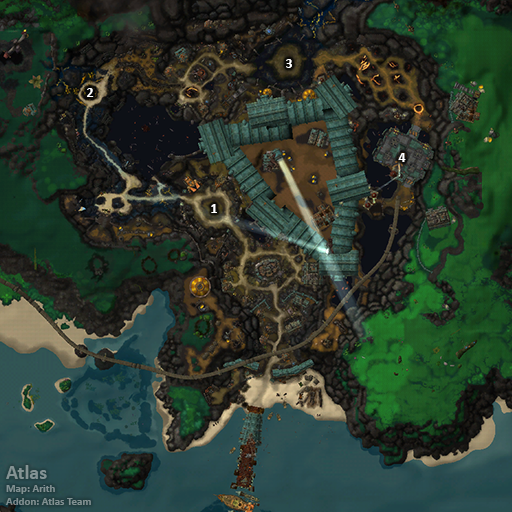
<style>
.page{position:relative;width:512px;height:512px}
.page>*{position:absolute;margin:0}
.t1{font:14px "Calibri-Bold";color:#ffffff}
.t2{font:11px "Calibri-Bold";color:#819193}
.t3{font:20px "Calibri-Bold";color:#819193}
</style>
<div class="page">
<p class="t1" style="left:286px;top:59px;width:6px;height:9px">3</p>
<p class="t1" style="left:87px;top:88px;width:7px;height:9px">2</p>
<p class="t1" style="left:398px;top:153px;width:8px;height:9px">4</p>
<p class="t1" style="left:211px;top:204px;width:6px;height:9px">1</p>
<p class="t2" style="left:6px;top:465px;width:85px;height:40px"><span class="t3">Atlas<br></span>Map: Arith<br>Addon: Atlas Team</p>
</div>
